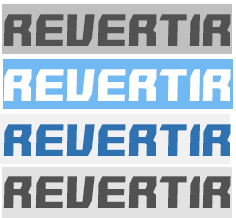
<style>
.page{position:relative;width:236px;height:218px}
.page>*{position:absolute;margin:0}
.t1{font:44px "SHMUP-in-the-zone";color:#525252}
.t2{font:44px "SHMUP-in-the-zone";color:#fffeff}
.t3{font:44px "SHMUP-in-the-zone";color:#2e72b2}
</style>
<div class="page">
<p class="t1" style="left:3px;top:14px;width:228px;height:32px">REVERTIR</p>
<p class="t2" style="left:3px;top:69px;width:228px;height:32px">REVERTIR</p>
<p class="t3" style="left:3px;top:124px;width:228px;height:32px">REVERTIR</p>
<p class="t1" style="left:3px;top:176px;width:228px;height:32px">REVERTIR</p>
</div>
